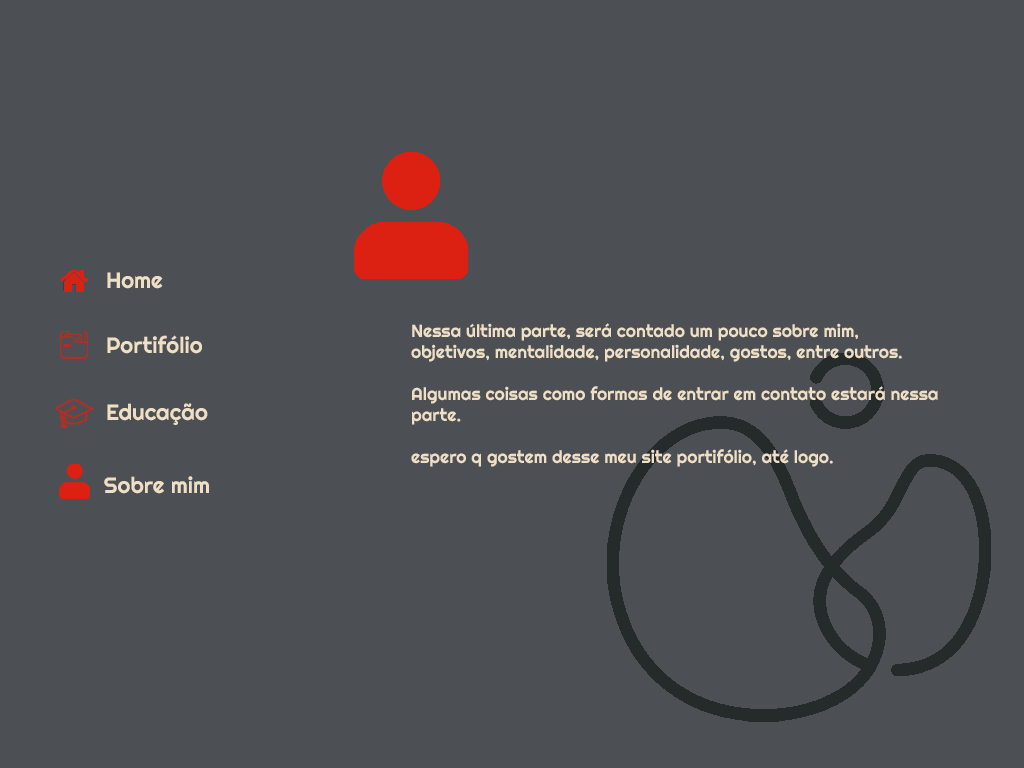
<style>
.page{position:relative;width:1024px;height:768px;background:#4c4f54}
.page>*{position:absolute;margin:0}
.t1{font:22.3px "Righteous-Regular";color:#efdfc5}
.t2{font:17.5px "Righteous-Regular";color:#efdfc5}
</style>
<div class="page">
<p class="t1" style="left:107px;top:272px;width:56px;height:17px">Home</p>
<p class="t2" style="left:411px;top:323px;width:527px;height:144px">Nessa última parte, será contado um pouco sobre mim,<br>objetivos, mentalidade, personalidade, gostos, entre outros.<br><br>Algumas coisas como formas de entrar em contato estará nessa <br>parte.<br><br>espero q gostem desse meu site portifólio, até logo.</p>
<p class="t1" style="left:107px;top:335px;width:95px;height:19px">Portifólio</p>
<p class="t1" style="left:107px;top:403px;width:101px;height:22px">Educação</p>
<p class="t1" style="left:104px;top:476px;width:105px;height:18px">Sobre mim</p>
</div>
